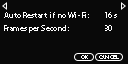
<style>
.page{position:relative;width:128px;height:64px;background:#090909}
.page>*{position:absolute;margin:0}
.t1{font:8px "MyriadPro-Regular";color:#ffffff}
.t2{font:6px "MyriadPro-Regular";color:#ffffff}
</style>
<div class="page">
<p class="t1" style="left:4px;top:12px;width:85px;height:6px">Auto Restart  if  no Wi - Fi :</p>
<p class="t1" style="left:105px;top:12px;width:7px;height:6px">16</p>
<p class="t1" style="left:114px;top:14px;width:3px;height:4px">s</p>
<p class="t1" style="left:4px;top:25px;width:65px;height:8px">Frames per Second :</p>
<p class="t1" style="left:105px;top:25px;width:7px;height:6px">30</p>
<p class="t2" style="left:81px;top:55px;width:7px;height:4px">OK</p>
<p class="t2" style="left:99px;top:55px;width:20px;height:4px">CANCEL</p>
</div>
